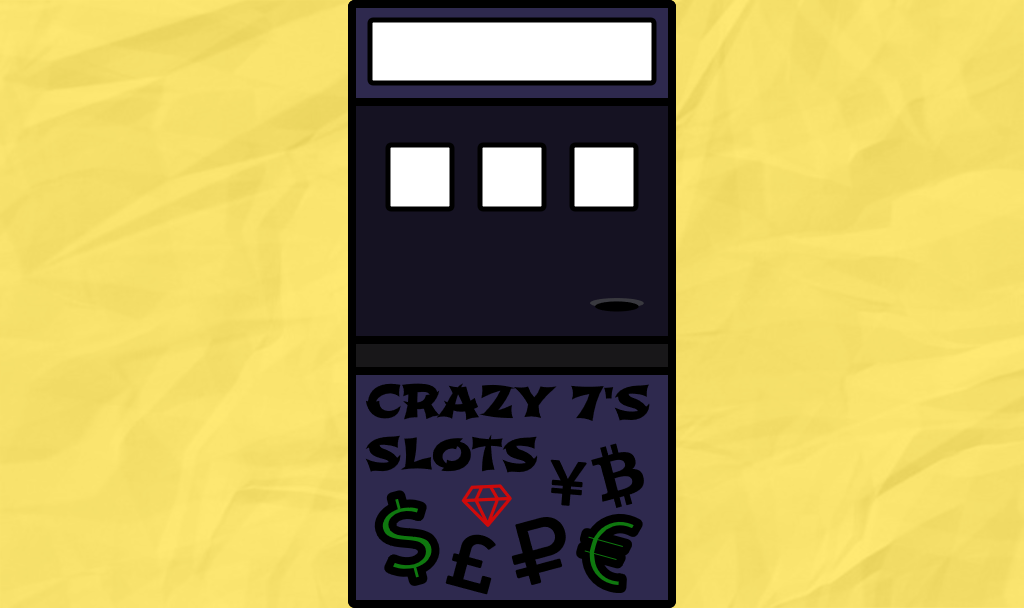
<style>
.page{position:relative;width:1024px;height:608px}
.page>*{position:absolute;margin:0}
.t1{font:44px "Shojumaru-Regular";color:#000000}
</style>
<div class="page">
<p class="t1" style="left:365px;top:383px;width:285px;height:90px">CRAZY 7'S<br>SLOTS</p>
</div>
